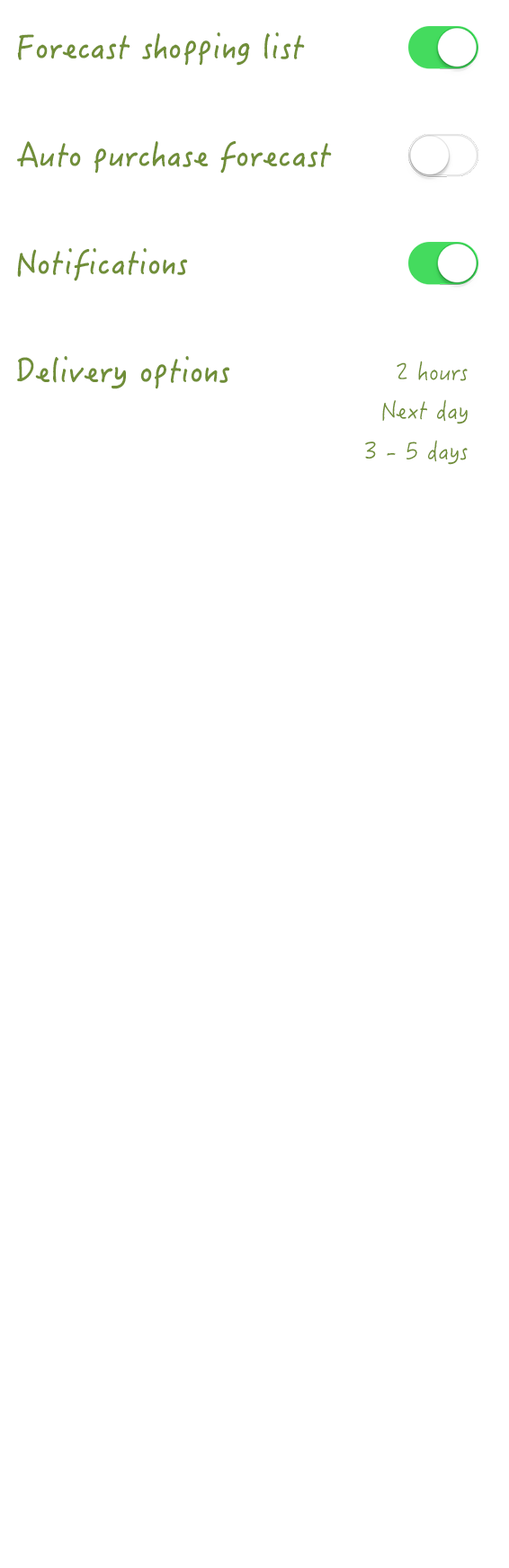
<style>
.page{position:relative;width:509px;height:1568px;background:#ffffff}
.page>*{position:absolute;margin:0}
.t1{font:32.6px "HanziPenTC-W5";color:#708e38}
.t2{font:24.4px "HanziPenTC-W3";color:#708e38}
</style>
<div class="page">
<p class="t1" style="left:17px;top:32px;width:288px;height:34px">Forecast shopping list</p>
<p class="t1" style="left:17px;top:141px;width:315px;height:33px">Auto purchase forecast</p>
<p class="t1" style="left:17px;top:248px;width:171px;height:33px">Notifications</p>
<p class="t1" style="left:17px;top:356px;width:213px;height:33px">Delivery options</p>
<p class="t2" style="left:396px;top:361px;width:72px;height:20px">2 hours</p>
<p class="t2" style="left:382px;top:399px;width:86px;height:25px">Next day</p>
<p class="t2" style="left:365px;top:440px;width:103px;height:25px">3 - 5 days</p>
</div>
